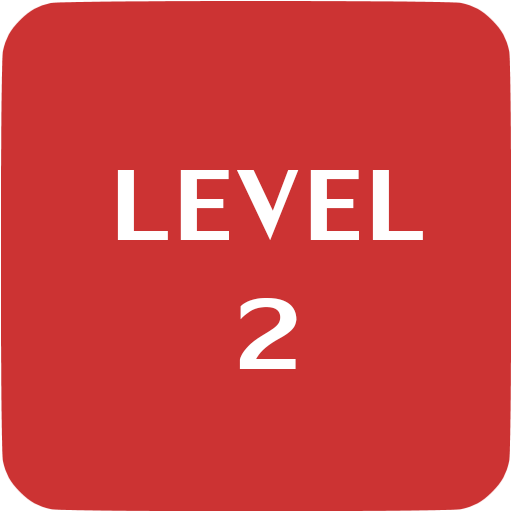
<style>
.page{position:relative;width:512px;height:512px;background:#cc3333}
.page>*{position:absolute;margin:0}
.t1{font:150px "LilyUPC";letter-spacing:0.05em;color:#ffffff}
</style>
<div class="page">
<p class="t1" style="left:117px;top:170px;width:306px;height:70px">LEVEL</p>
<p class="t1" style="left:239px;top:298px;width:58px;height:71px">2</p>
</div>
